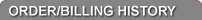
<style>
.page{position:relative;width:202px;height:20px;background:#858585}
.page>*{position:absolute;margin:0}
.t1{font:13.3px "Arial-BoldMT";color:#ffffff}
</style>
<div class="page">
<p class="t1" style="left:9px;top:5px;width:167px;height:11px">ORDER/BILLING HISTORY</p>
</div>
